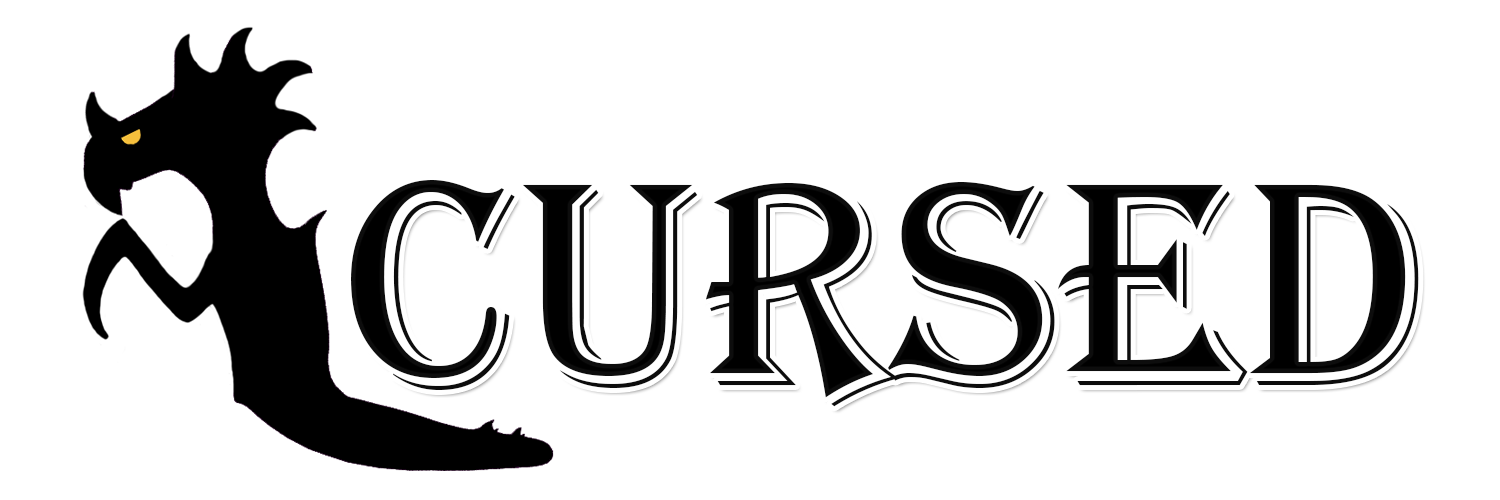
<style>
.page{position:relative;width:1500px;height:500px;background:#ffffff}
.page>*{position:absolute;margin:0}
.t1{font:300px "Algerian";color:#000000}
</style>
<div class="page">
<p class="t1" style="left:351px;top:179px;width:1068px;height:228px">CURSED</p>
</div>
